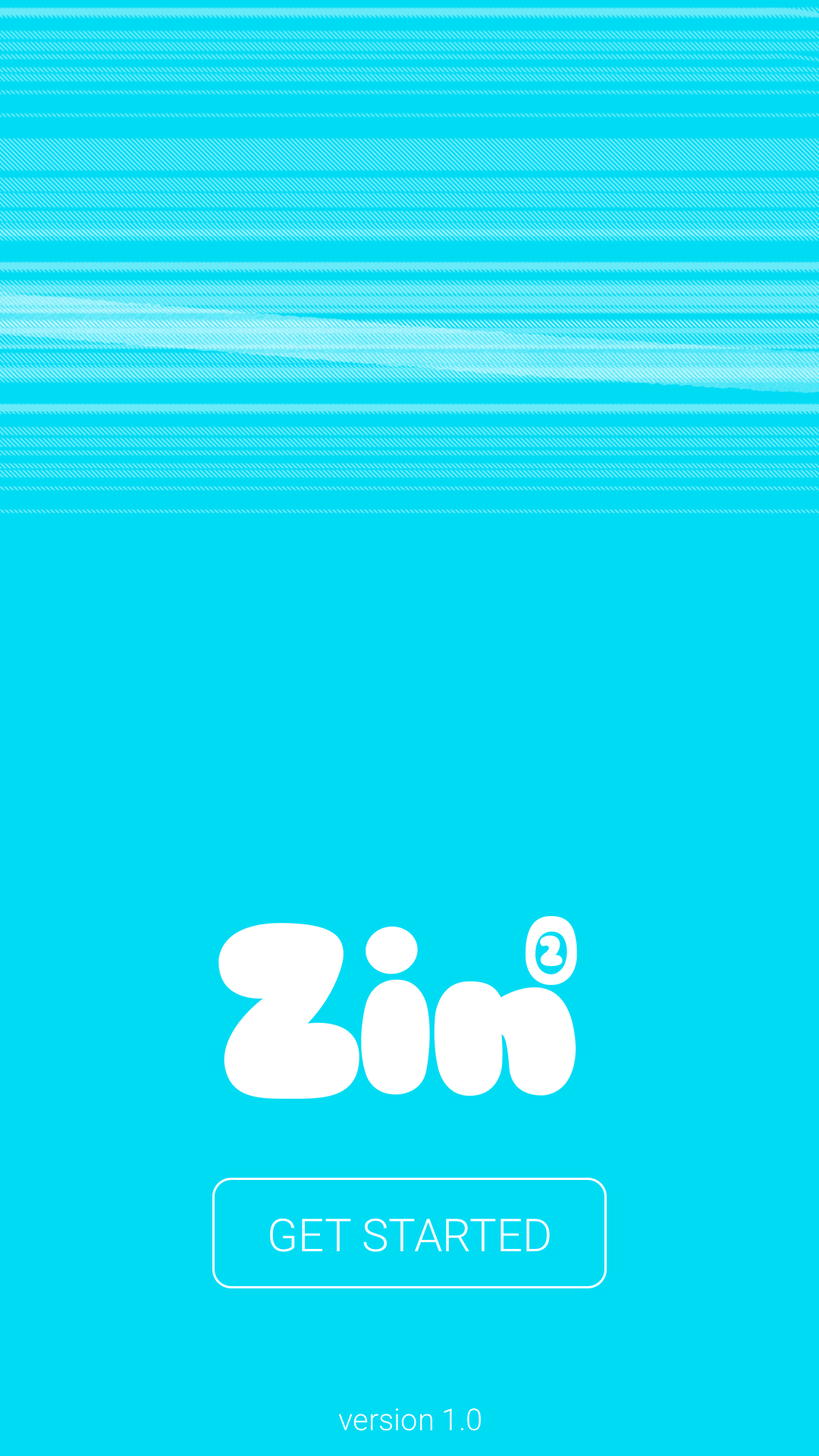
<style>
.page{position:relative;width:819px;height:1456px;background:#00dbf4}
.page>*{position:absolute;margin:0}
.t1{font:45.5px "Roboto-Light";color:#ffffff}
.t2{font:30.3px "Roboto-Light";color:#ffffff}
</style>
<div class="page">
<p class="t1" style="left:270px;top:1218px;width:280px;height:34px">GET STARTED</p>
<p class="t2" style="left:338px;top:1408px;width:143px;height:23px">version 1.0</p>
</div>
